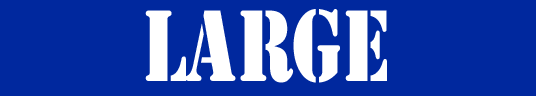
<style>
.page{position:relative;width:536px;height:96px;background:#00289e}
.page>*{position:absolute;margin:0}
.t1{font:94.3px "StencilStd";letter-spacing:0.005em;color:#ffffff;scale:0.76 1}
</style>
<div class="page">
<p class="t1" style="left:145px;top:9px;width:242px;height:74px">Large</p>
</div>
